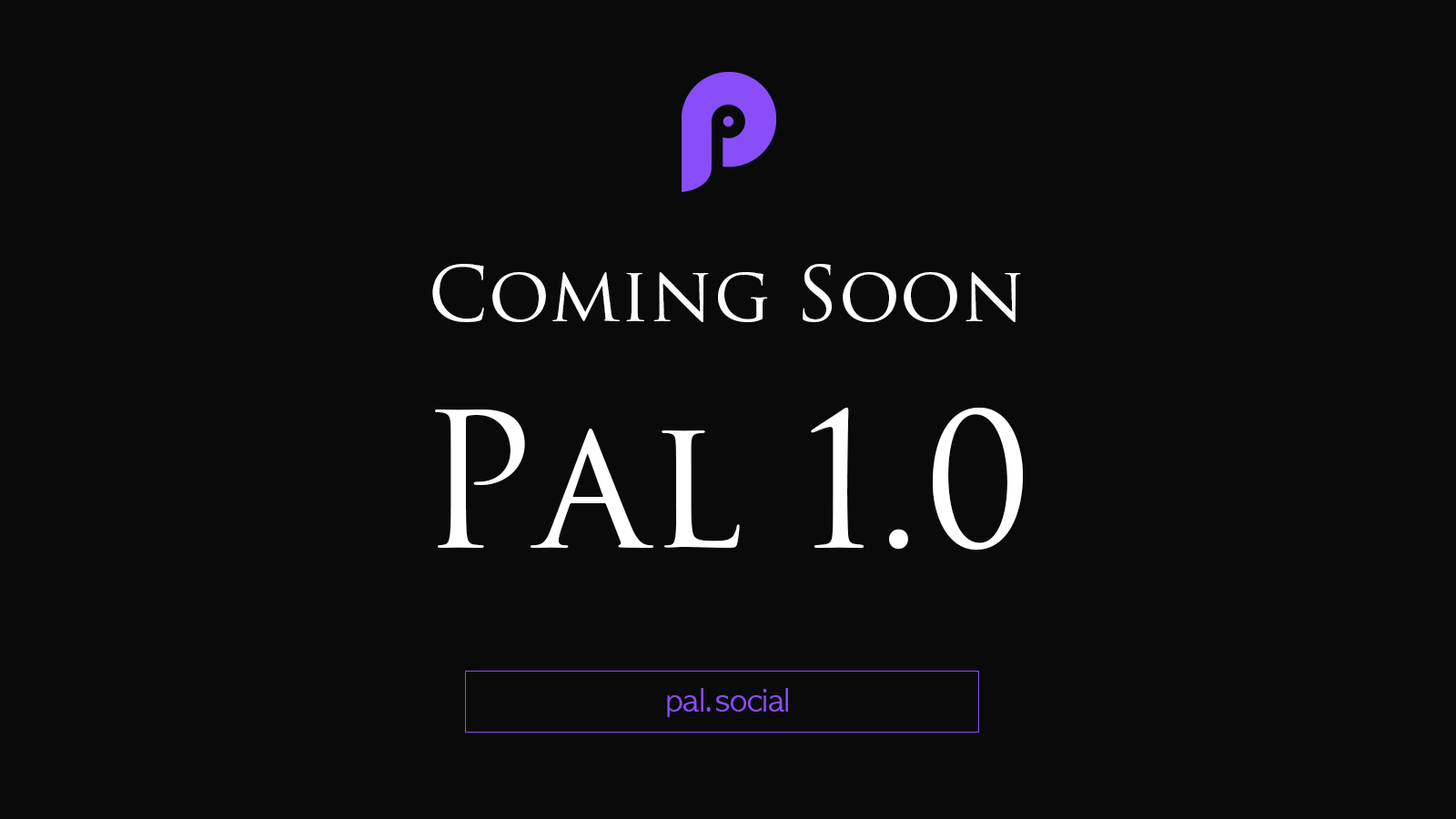
<style>
.page{position:relative;width:1456px;height:819px;background:#0a0a0a}
.page>*{position:absolute;margin:0}
.t1{font:75.8px "TrajanPro3-Regular";color:#ffffff}
.t2{font:182px "TrajanPro3-Regular";color:#ffffff}
.t3{font:30px "AppleGothic";color:#894dfa}
</style>
<div class="page">
<p class="t1" style="left:432px;top:264px;width:591px;height:287px;text-align:center">Coming Soon<br><span class="t2">Pal 1.0</span></p>
<p class="t3" style="left:667px;top:688px;width:121px;height:29px">pal.social</p>
</div>
